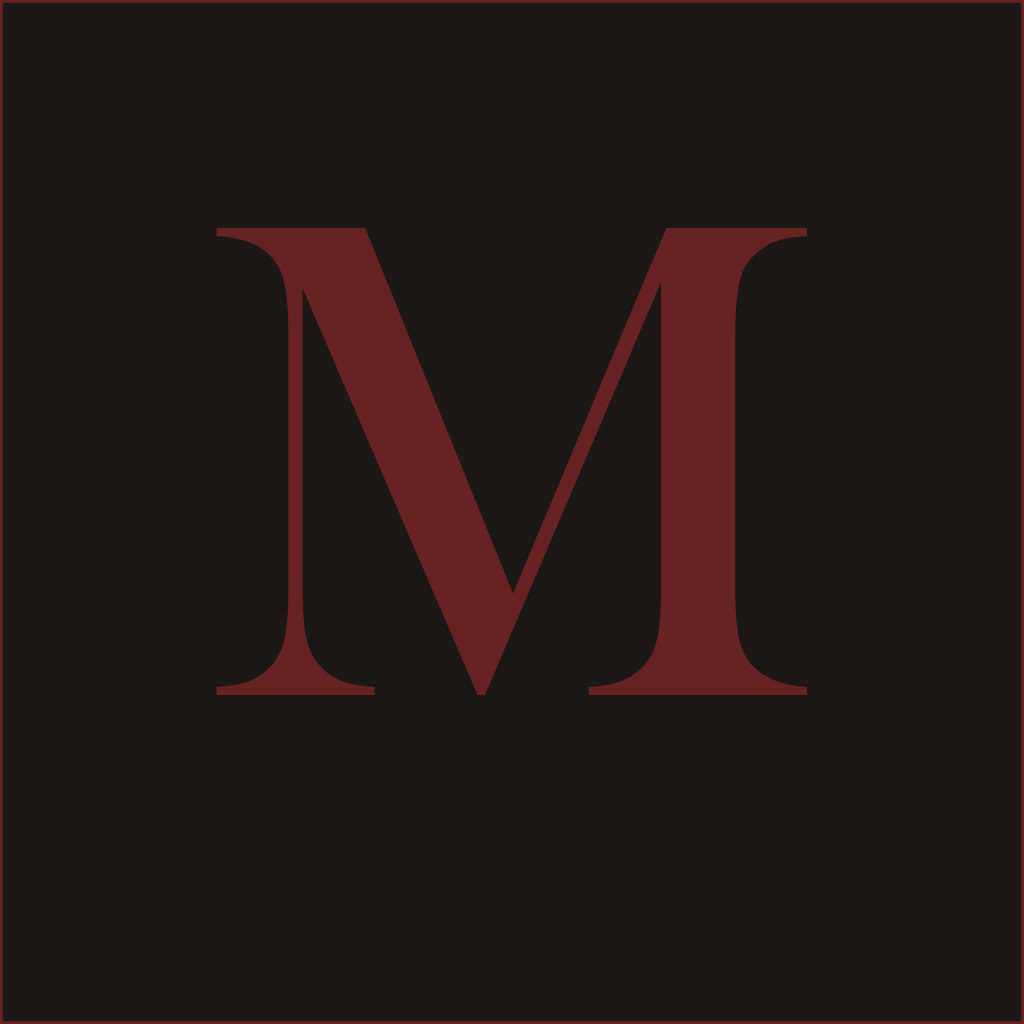
<style>
.page{position:relative;width:1024px;height:1024px;background:#1c1818}
.page>*{position:absolute;margin:0}
.t1{font:700px "BaskOldFace";color:#672222}
</style>
<div class="page">
<p class="t1" style="left:216px;top:227px;width:591px;height:468px">M</p>
</div>
